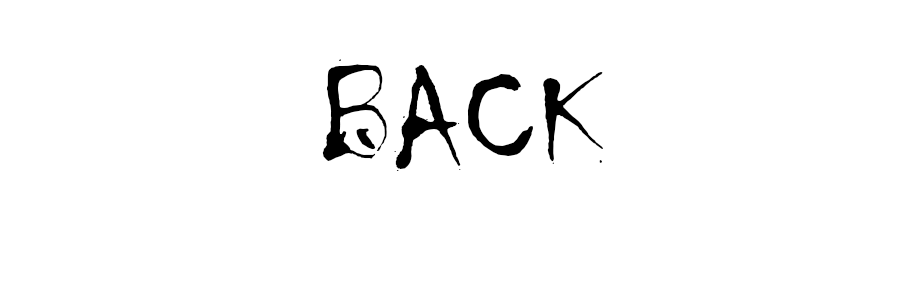
<style>
.page{position:relative;width:921px;height:285px;background:#ffffff}
.page>*{position:absolute;margin:0}
.t1{font:141.7px "Chiller-Regular";color:#000000}
</style>
<div class="page">
<p class="t1" style="left:322px;top:59px;width:282px;height:112px">BACK</p>
</div>
